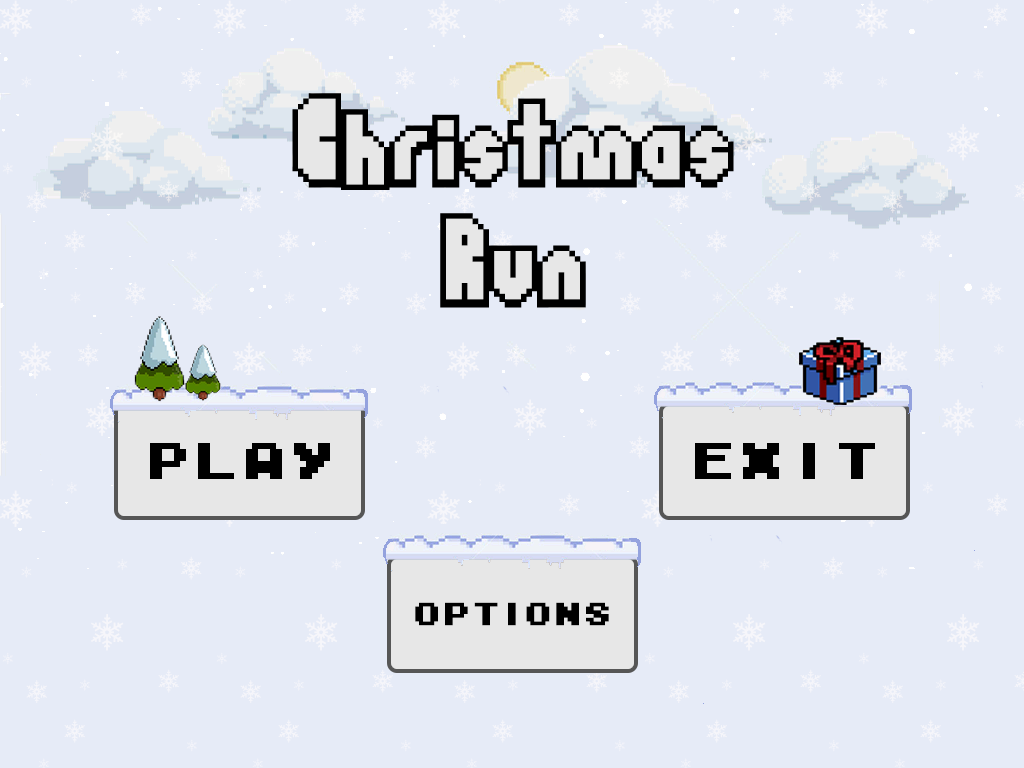
<style>
.page{position:relative;width:1024px;height:768px;background:#e6ebf7}
.page>*{position:absolute;margin:0}
.t1{font:48px "M04_FATAL-FURY-BLACK";color:#000000}
.t2{font:30px "M04_FATAL-FURY-BLACK";color:#000000}
</style>
<div class="page">
<p class="t1" style="left:150px;top:443px;width:180px;height:36px">Play</p>
<p class="t1" style="left:695px;top:443px;width:180px;height:36px">exit</p>
<p class="t2" style="left:415px;top:602px;width:194px;height:24px">OPTIONS</p>
</div>
